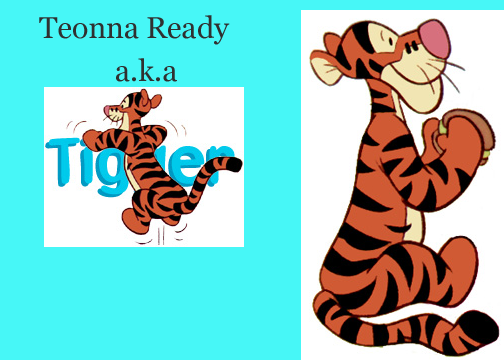
<style>
.page{position:relative;width:504px;height:360px;background:#47f7f7}
.page>*{position:absolute;margin:0}
.t1{font:30px "Georgia";color:#303030}
</style>
<div class="page">
<p class="t1" style="left:39px;top:15px;width:191px;height:30px">Teonna Ready</p>
<p class="t1" style="left:116px;top:58px;width:61px;height:24px">a.k.a</p>
</div>
